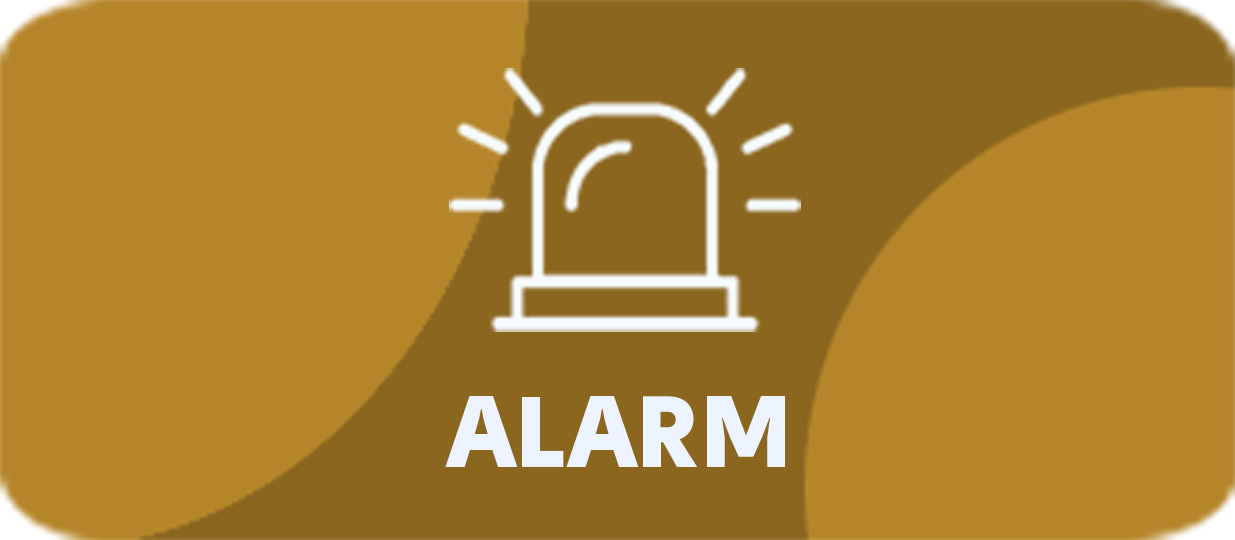
<style>
.page{position:relative;width:1235px;height:540px;background:#b5852a}
.page>*{position:absolute;margin:0}
.t1{font:100.7px "Solomon-Sans-Black";color:#eef4ff}
</style>
<div class="page">
<p class="t1" style="left:445px;top:396px;width:340px;height:71px">ALARM</p>
</div>
